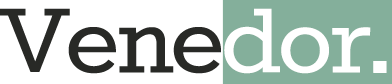
<style>
.page{position:relative;width:392px;height:84px;background:#ffffff}
.page>*{position:absolute;margin:0}
.t1{font:113.5px "Rokkitt";letter-spacing:-0.025em;color:#282926}
.t2{font:113.5px "Rokkitt";letter-spacing:-0.025em;color:#ffffff}
.t3{font:113.5px "Rokkitt";letter-spacing:-0.025em;color:#ffffff;font-weight:bold}
</style>
<div class="page">
<p class="t1" style="left:0px;top:8px;width:387px;height:66px">Vene<span class="t2">dor</span><span class="t3">.</span></p>
</div>
